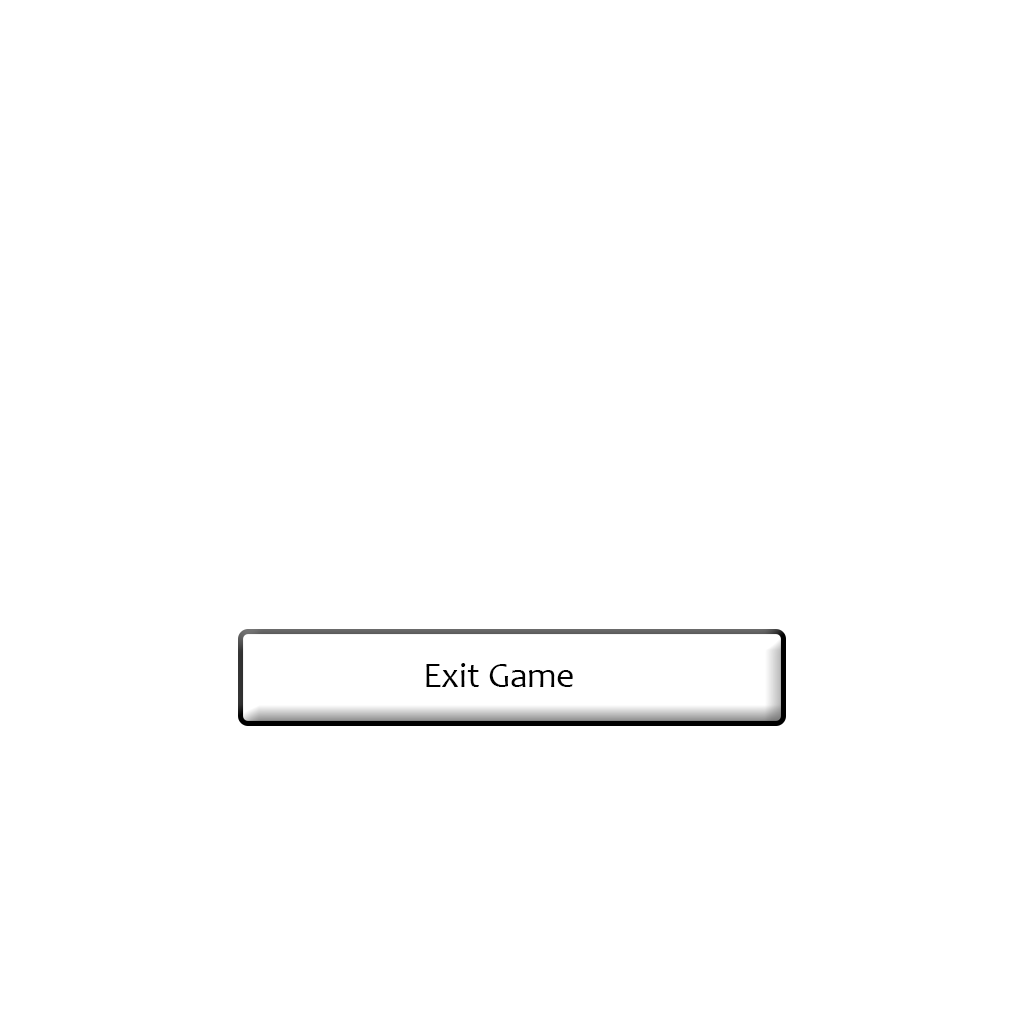
<style>
.page{position:relative;width:1024px;height:1024px;background:#ffffff}
.page>*{position:absolute;margin:0}
.t1{font:35.6px "Candara";color:#000000}
</style>
<div class="page">
<p class="t1" style="left:426px;top:663px;width:147px;height:24px">Exit Game</p>
</div>
